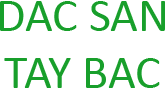
<style>
.page{position:relative;width:165px;height:88px;background:#ffffff}
.page>*{position:absolute;margin:0}
.t1{font:48px "Calibri";color:#189f2b}
</style>
<div class="page">
<p class="t1" style="left:0px;top:1px;width:165px;height:87px;text-align:center">DAC SAN <br>TAY BAC</p>
</div>
